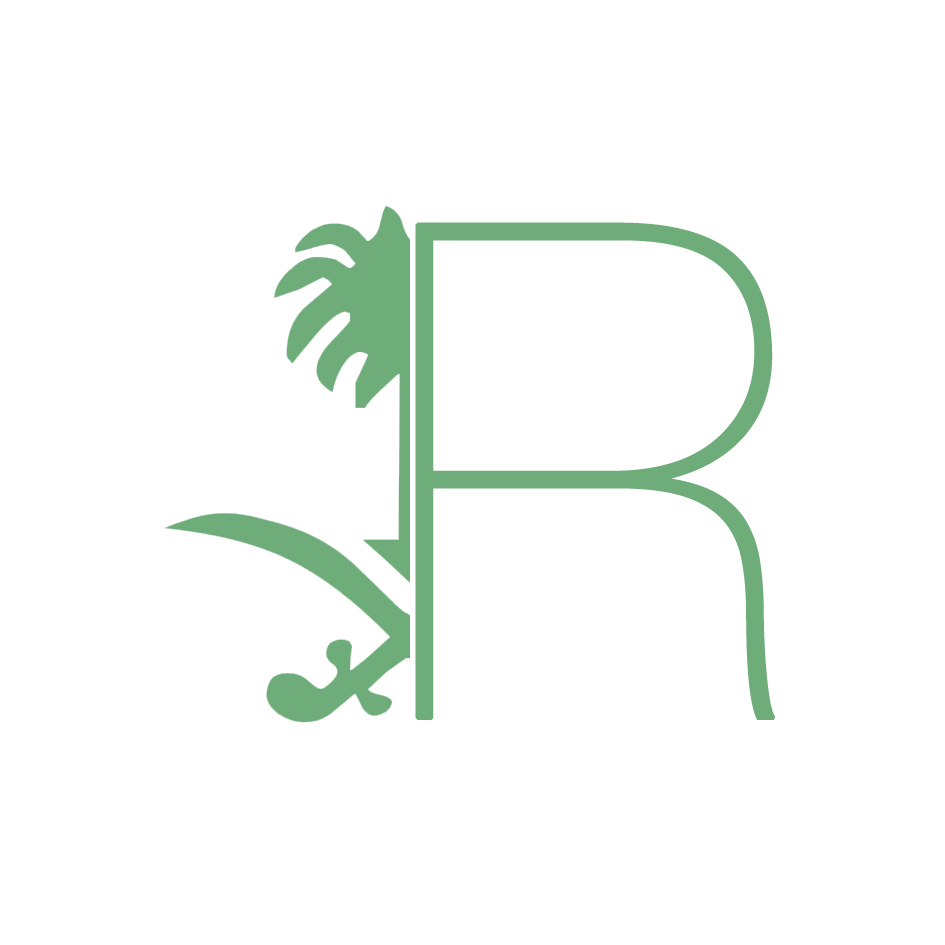
<style>
.page{position:relative;width:945px;height:945px;background:#ffffff}
.page>*{position:absolute;margin:0}
.t1{font:691.1px "HelveticaNeue-UltraLight";color:#6eac7a;font-weight:bold}
</style>
<div class="page">
<p class="t1" style="left:415px;top:222px;width:361px;height:498px">R</p>
</div>
